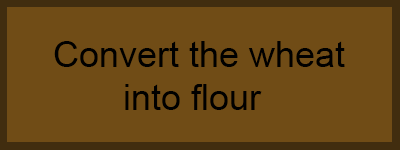
<style>
.page{position:relative;width:400px;height:150px;background:#704c16}
.page>*{position:absolute;margin:0}
.t1{font:36px "ArialMT";color:#000000}
</style>
<div class="page">
<p class="t1" style="left:54px;top:41px;width:291px;height:69px">Convert the wheat <br>       into flour</p>
</div>
